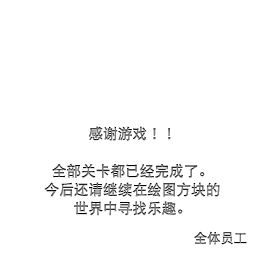
<style>
.page{position:relative;width:256px;height:256px;background:#ffffff}
.page>*{position:absolute;margin:0}
.t1{font:14.7px/18.7px "DFPHeiW5-GB"}
.t2{font:13.3px "DFPHeiW5-GB"}
</style>
<div class="page">
<p class="t1" style="left:44px;top:126px;width:176px;height:90px;text-align:center">感谢游戏！！<br><br>全部关卡都已经完成了。<br>今后还请继续在绘图方块的<br>世界中寻找乐趣。</p>
<p class="t2" style="left:194px;top:231px;width:53px;height:14px">全体员工</p>
</div>
